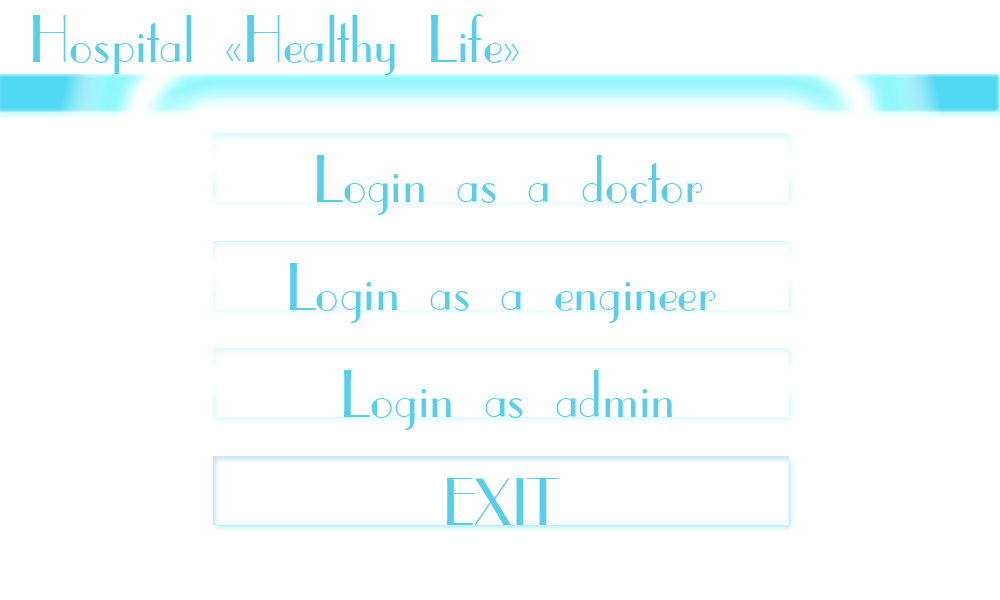
<style>
.page{position:relative;width:1000px;height:600px;background:#ffffff}
.page>*{position:absolute;margin:0}
.t1{font:63.5px "CafeParisC";color:#56ceec}
</style>
<div class="page">
<p class="t1" style="left:33px;top:14px;width:486px;height:61px">Hospital «Healthy Life»</p>
<p class="t1" style="left:317px;top:155px;width:386px;height:60px">Login as a doctor</p>
<p class="t1" style="left:290px;top:263px;width:426px;height:60px">Login as a engineer</p>
<p class="t1" style="left:344px;top:370px;width:328px;height:60px">Login as admin</p>
<p class="t1" style="left:447px;top:478px;width:112px;height:47px">EXIT</p>
</div>
